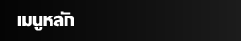
<style>
.page{position:relative;width:241px;height:41px}
.page>*{position:absolute;margin:0}
.t1{font:25px "LilyUPCBold";letter-spacing:0.01em;color:#ffffff}
</style>
<div class="page">
<p class="t1" style="left:17px;top:11px;width:57px;height:20px">เมนูหลัก</p>
</div>
